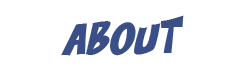
<style>
.page{position:relative;width:250px;height:75px;background:#ffffff}
.page>*{position:absolute;margin:0}
.t1{font:50px "HoustonComicsPersonalUse";color:#3a4e87}
</style>
<div class="page">
<p class="t1" style="left:61px;top:15px;width:123px;height:41px">ABOUT</p>
</div>
